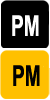
<style>
.page{position:relative;width:50px;height:100px;background:#000000}
.page>*{position:absolute;margin:0}
.t1{font:28.8px "Arial-BoldMT";color:#ffffff;text-transform:uppercase;scale:0.67 1}
.t2{font:28.8px "Arial-BoldMT";color:#000000;text-transform:uppercase;scale:0.67 1}
</style>
<div class="page">
<p class="t1" style="left:12px;top:15px;width:27px;height:21px">pm</p>
<p class="t2" style="left:13px;top:65px;width:27px;height:21px">pm</p>
</div>
